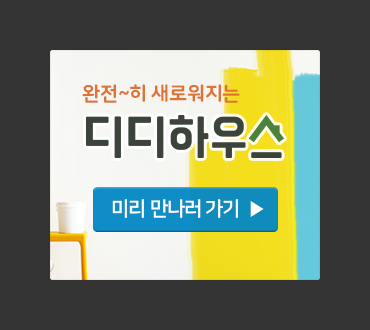
<style>
.page{position:relative;width:370px;height:330px;background:#333333}
.page>*{position:absolute;margin:0}
.t1{font:20px "NanumSquareRoundOTFEB";letter-spacing:-0.025em;color:#e07236}
.t2{font:20px "NanumSquareOTFB";letter-spacing:-0.05em;color:#fffffe}
</style>
<div class="page">
<p class="t1" style="left:82px;top:84px;width:158px;height:19px">완전~히 새로워지는</p>
<p class="t2" style="left:112px;top:199px;width:152px;height:19px">미리 만나러 가기  ▶︎</p>
</div>
